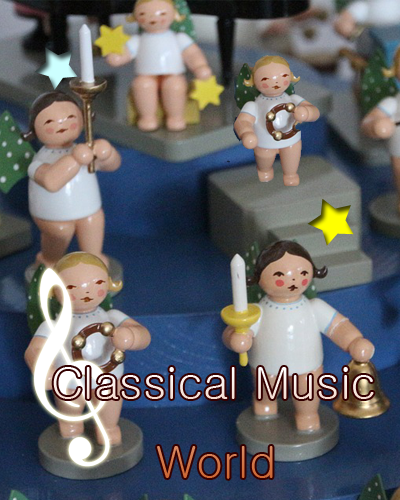
<style>
.page{position:relative;width:400px;height:500px}
.page>*{position:absolute;margin:0}
.t1{font:45px "Gulim"}
</style>
<div class="page">
<p class="t1" style="left:53px;top:367px;width:321px;height:112px">Classical Music<br>       World</p>
</div>
